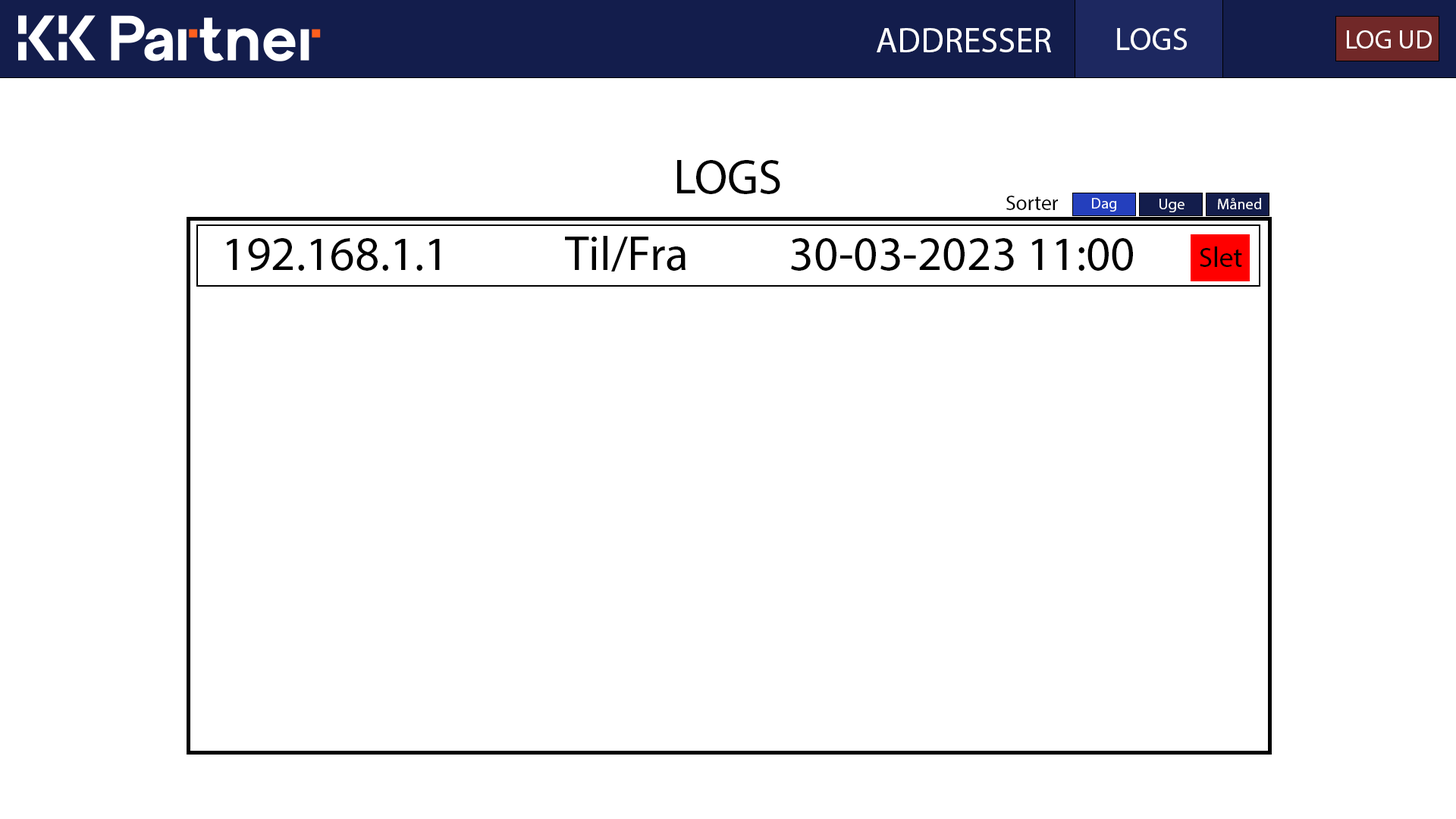
<style>
.page{position:relative;width:1456px;height:819px;background:#ffffff}
.page>*{position:absolute;margin:0}
.t1{font:35.2px "MyriadPro-Regular";color:#ffffff}
.t2{font:32.6px "MyriadPro-Regular";color:#ffffff}
.t3{font:26.8px "MyriadPro-Regular";color:#ffffff}
.t4{font:48.2px "MyriadPro-Regular";color:#000000}
.t5{font:20.7px "MyriadPro-Regular";color:#000000}
.t6{font:15.5px "MyriadPro-Regular";color:#ffffff}
.t7{font:28px "MyriadPro-Regular";color:#000000}
</style>
<div class="page">
<p class="t1" style="left:877px;top:28px;width:174px;height:24px">ADDRESSER</p>
<p class="t2" style="left:1117px;top:28px;width:70px;height:22px">LOGS</p>
<p class="t3" style="left:1347px;top:30px;width:85px;height:19px">LOG UD</p>
<p class="t4" style="left:677px;top:160px;width:103px;height:34px">LOGS</p>
<p class="t5" style="left:1006px;top:196px;width:52px;height:14px">Sorter</p>
<p class="t6" style="left:1092px;top:198px;width:24px;height:14px">Dag</p>
<p class="t6" style="left:1218px;top:198px;width:43px;height:11px">Måned</p>
<p class="t6" style="left:1159px;top:199px;width:26px;height:13px">Uge</p>
<p class="t4" style="left:226px;top:238px;width:214px;height:33px">192.168.1.1</p>
<p class="t4" style="left:565px;top:236px;width:121px;height:35px">Til/Fra</p>
<p class="t4" style="left:791px;top:238px;width:342px;height:33px">30-03-2023 11:00</p>
<p class="t7" style="left:1200px;top:246px;width:42px;height:21px">Slet</p>
</div>
